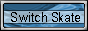
<style>
.page{position:relative;width:88px;height:31px}
.page>*{position:absolute;margin:0}
.t1{font:13.2px "ArialMT";letter-spacing:0.05em;color:#000000;scale:0.83 1}
</style>
<div class="page">
<p class="t1" style="left:11px;top:12px;width:69px;height:10px">Switch Skate</p>
</div>
